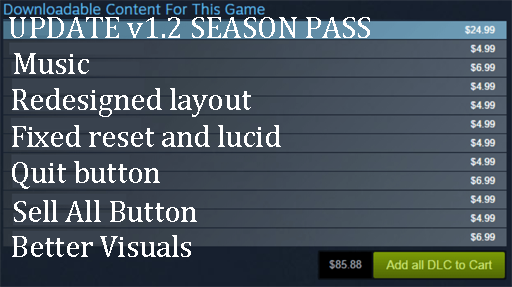
<style>
.page{position:relative;width:512px;height:287px}
.page>*{position:absolute;margin:0}
.t1{font:30.6px "CambriaMath";color:#ffffff}
</style>
<div class="page">
<p class="t1" style="left:9px;top:17px;width:361px;height:21px">UPDATE v1.2 SEASON PASS</p>
<p class="t1" style="left:14px;top:53px;width:75px;height:21px">Music</p>
<p class="t1" style="left:12px;top:88px;width:239px;height:29px">Redesigned layout</p>
<p class="t1" style="left:12px;top:125px;width:269px;height:22px">Fixed reset and lucid</p>
<p class="t1" style="left:12px;top:161px;width:148px;height:28px">Quit button</p>
<p class="t1" style="left:14px;top:200px;width:183px;height:22px">Sell All Button</p>
<p class="t1" style="left:12px;top:235px;width:179px;height:22px">Better Visuals</p>
</div>
